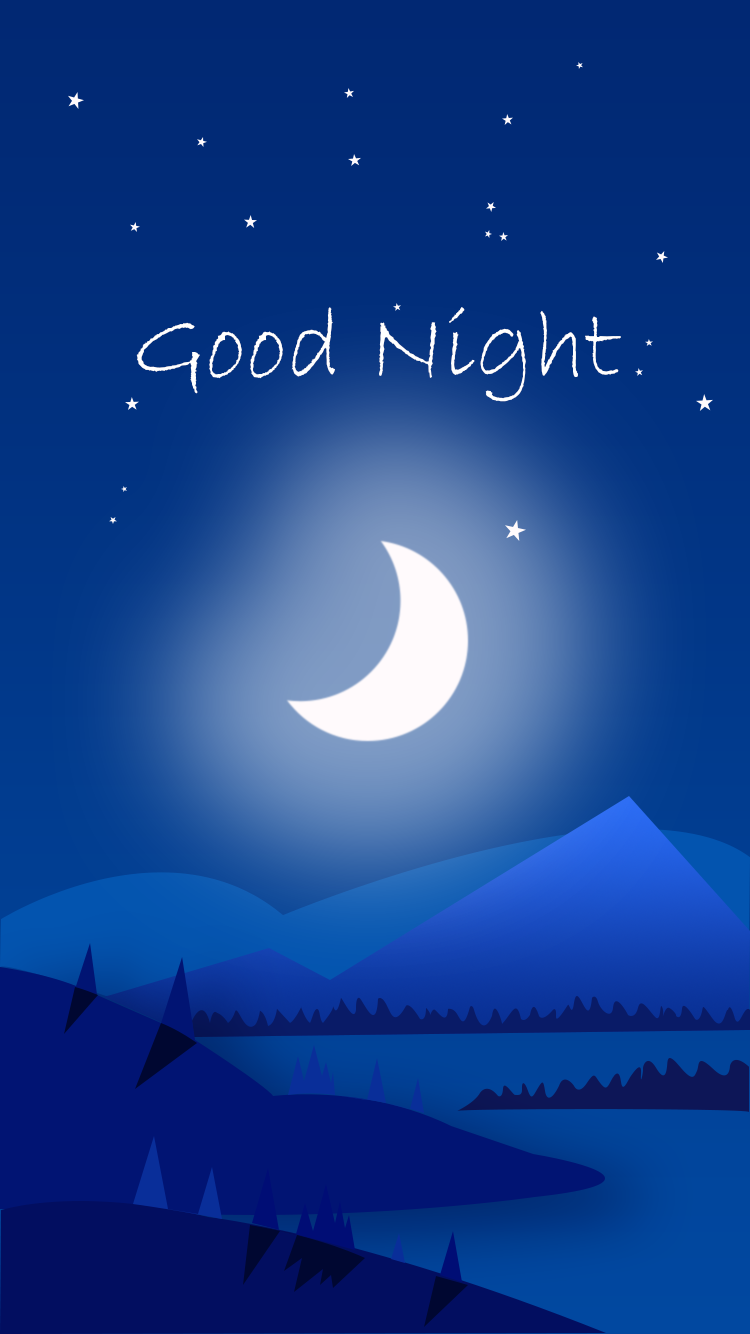
<style>
.page{position:relative;width:750px;height:1334px}
.page>*{position:absolute;margin:0}
.t1{font:101px "BradleyHandITC";color:#ffffff}
</style>
<div class="page">
<p class="t1" style="left:136px;top:307px;width:485px;height:95px">Good Night</p>
</div>
